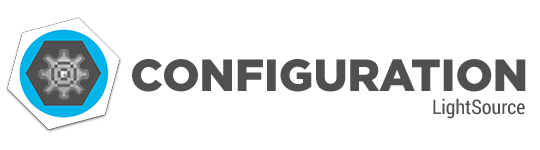
<style>
.page{position:relative;width:540px;height:150px;background:#ffffff}
.page>*{position:absolute;margin:0}
.t1{font:45px "GothamPro-Black";color:#505050}
.t2{font:20px "RobotoCondensed-Regular";color:#505050}
</style>
<div class="page">
<p class="t1" style="left:132px;top:59px;width:394px;height:33px">CONFIGURATION</p>
<p class="t2" style="left:433px;top:98px;width:92px;height:21px">LightSource</p>
</div>
